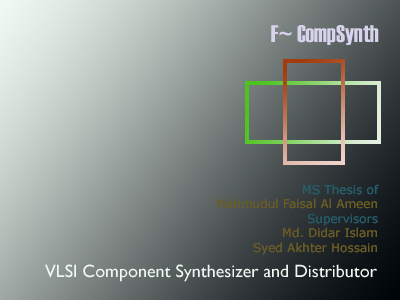
<style>
.page{position:relative;width:400px;height:300px}
.page>*{position:absolute;margin:0}
.t1{font:24px "Haettenschweiler";color:#d8d3ed}
.t2{font:12px "Verdana";color:#6a5c25}
.t3{font:12px "Verdana";color:#255f6a}
.t4{font:12px "Verdana";color:#255c6a}
.t5{font:18px "GillSansMT";color:#eff9f1}
</style>
<div class="page">
<p class="t1" style="left:271px;top:25px;width:108px;height:20px">F~ CompSynth</p>
<p class="t2" style="left:217px;top:184px;width:162px;height:71px;text-align:right"><span class="t3">MS Thesis of<br></span>Mahmudul Faisal Al Ameen<br><span class="t4">Supervisors<br></span>Md. Didar Islam<br>Syed Akhter Hossain</p>
<p class="t5" style="left:45px;top:264px;width:332px;height:18px">VLSI Component Synthesizer and Distributor</p>
</div>
